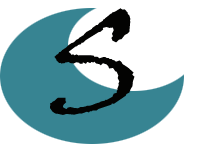
<style>
.page{position:relative;width:200px;height:158px;background:#ffffff}
.page>*{position:absolute;margin:0}
.t1{font:141px "VinerHandITC";color:#030302}
</style>
<div class="page">
<p class="t1" style="left:50px;top:8px;width:85px;height:107px">S</p>
</div>
